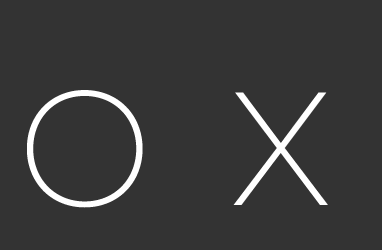
<style>
.page{position:relative;width:382px;height:250px;background:#333333}
.page>*{position:absolute;margin:0}
.t1{font:142.1px "GmarketSansLight";color:#ffffff}
</style>
<div class="page">
<p class="t1" style="left:27px;top:90px;width:116px;height:118px">O</p>
<p class="t1" style="left:233px;top:92px;width:95px;height:113px">X</p>
</div>
